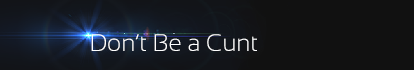
<style>
.page{position:relative;width:414px;height:70px;background:#111111}
.page>*{position:absolute;margin:0}
.t1{font:24px "Sansation-Light";color:#ffffff}
</style>
<div class="page">
<p class="t1" style="left:91px;top:34px;width:166px;height:17px">Don’t Be a Cunt</p>
</div>
